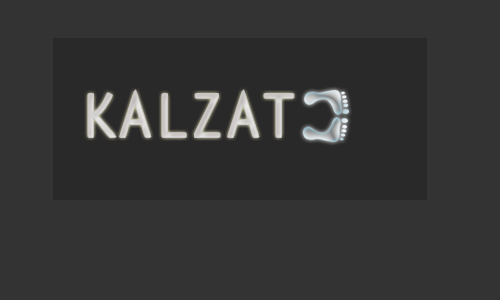
<style>
.page{position:relative;width:500px;height:300px;background:#333333}
.page>*{position:absolute;margin:0}
.t1{font:60px "LetterGothicStd-Bold";color:#d1cdcb}
</style>
<div class="page">
<p class="t1" style="left:88px;top:90px;width:206px;height:47px">KALZAT</p>
</div>
